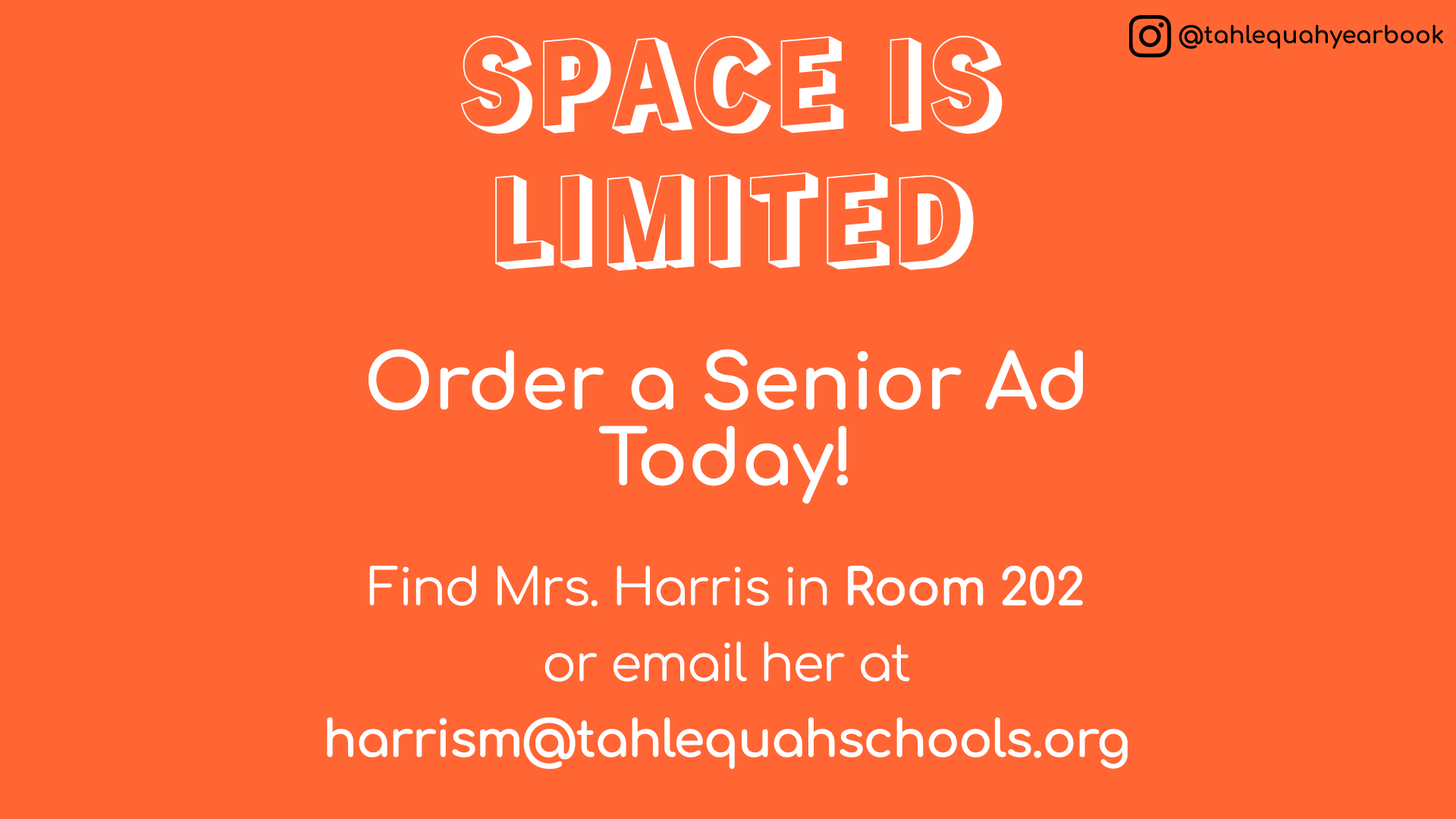
<style>
.page{position:relative;width:1456px;height:819px;background:#ff6633}
.page>*{position:absolute;margin:0}
.t1{font:113.7px/0px "RampartOne-Regular";color:#ffffff}
.t2{font:113.7px "RampartOne-Regular";color:#ffffff}
.t3{font:50.6px/75.8px "Comfortaa-Bold";letter-spacing:-0.025em;color:#ffffff}
.t4{font:75.8px/75.8px "Comfortaa-Bold";color:#ffffff}
.t5{font:50.6px/75.8px "Comfortaa-Regular";letter-spacing:-0.025em;color:#ffffff}
</style>
<div class="page">
<p class="t1" style="left:461px;top:36px;width:542px;height:235px;text-align:center">SPACE IS <span class="t2">LIMITED</span></p>
<p class="t3" style="left:327px;top:349px;width:801px;height:420px;text-align:center"><span class="t4">Order a Senior Ad Today!<br><br></span><span class="t5">Find Mrs. Harris in </span>Room 202<br><span class="t5">or email her at </span>harrism@tahlequahschools.org</p>
</div>
